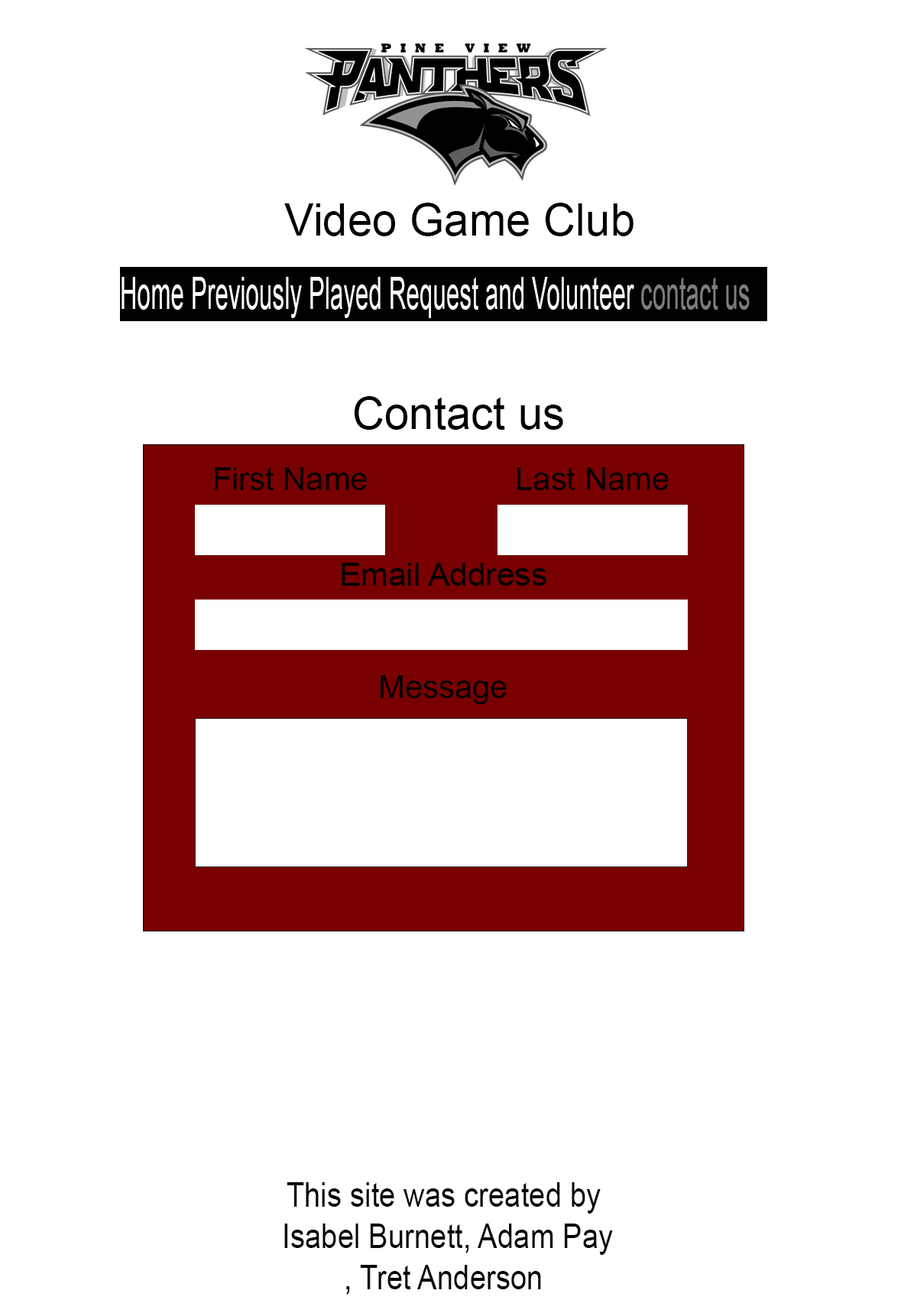
<style>
.page{position:relative;width:917px;height:1300px;background:#ffffff}
.page>*{position:absolute;margin:0}
.t1{font:44.6px "ArialMT";color:#000000}
.t2{font:44.2px "ArialMT";color:#fdfafa;scale:0.54 1}
.t3{font:31.9px "ArialMT";color:#000000}
.t4{font:34.1px "ArialMT";color:#060606;scale:0.86 1}
</style>
<div class="page">
<p class="t1" style="left:284px;top:203px;width:350px;height:33px">Video Game Club</p>
<p class="t2" style="left:122px;top:277px;width:628px;height:41px">Home Previously Played Request and Volunteer contact us</p>
<p class="t1" style="left:354px;top:396px;width:209px;height:34px">Contact us</p>
<p class="t3" style="left:215px;top:467px;width:152px;height:23px">First Name</p>
<p class="t3" style="left:518px;top:467px;width:151px;height:23px">Last Name</p>
<p class="t3" style="left:342px;top:563px;width:205px;height:23px">Email Address</p>
<p class="t3" style="left:381px;top:675px;width:126px;height:29px">Message</p>
<p class="t4" style="left:284px;top:1182px;width:329px;height:112px;text-align:center">This site was created by<br> Isabel Burnett, Adam Pay<br>, Tret Anderson</p>
</div>
